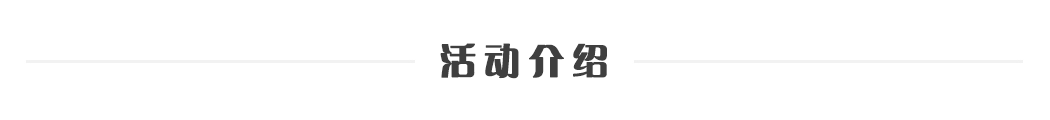
<style>
.page{position:relative;width:1050px;height:120px;background:#ffffff}
.page>*{position:absolute;margin:0}
.t1{font:36px "FZCQJW--GB1-0";letter-spacing:0.2em;color:#3f3f3f;font-weight:bold}
</style>
<div class="page">
<p class="t1" style="left:440px;top:43px;width:167px;height:36px">活动介绍</p>
</div>
